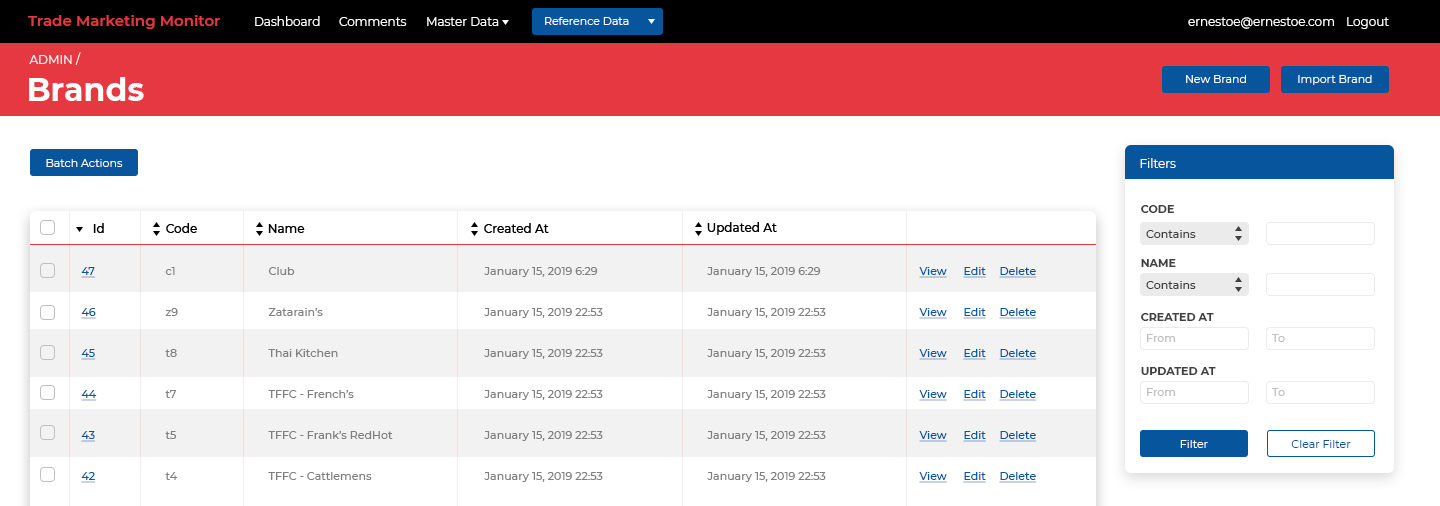
<style>
.page{position:relative;width:1440px;height:506px;background:#ffffff}
.page>*{position:absolute;margin:0}
.t1{font:15px "Montserrat-SemiBold";color:#e53841}
.t2{font:12px "Montserrat-Regular";color:#ffffff}
.t3{font:11px "Montserrat-Regular";color:#ffffff}
.t4{font:32.5px "Montserrat-Bold";color:#ffffff}
.t5{font:11px "Montserrat-Bold";color:#404040}
.t6{font:12px "Montserrat-Medium";color:#000000}
.t7{font:11px "Montserrat-Medium";color:#404040}
.t8{font:11px/41px "Montserrat-Medium";color:#808080}
.t9{font:11px/41px "Montserrat-Medium";color:#07559c;text-decoration:underline}
.t10{font:11px "Montserrat-Medium";color:#bfbfbf}
.t11{font:11px "Montserrat-Regular";color:#07559c}
</style>
<div class="page">
<p class="t1" style="left:27px;top:15px;width:193px;height:14px">Trade Marketing Monitor</p>
<p class="t2" style="left:255px;top:16px;width:65px;height:10px">Dashboard</p>
<p class="t2" style="left:339px;top:17px;width:68px;height:9px">Comments</p>
<p class="t2" style="left:427px;top:17px;width:72px;height:9px">Master Data</p>
<p class="t3" style="left:545px;top:17px;width:84px;height:8px">Reference Data</p>
<p class="t2" style="left:1188px;top:17px;width:146px;height:12px">ernestoe@ernestoe.com</p>
<p class="t2" style="left:1347px;top:17px;width:42px;height:12px">Logout</p>
<p class="t2" style="left:29px;top:52px;width:52px;height:13px">ADMIN /</p>
<p class="t4" style="left:29px;top:77px;width:115px;height:24px">Brands</p>
<p class="t3" style="left:1186px;top:75px;width:60px;height:8px">New Brand</p>
<p class="t3" style="left:1298px;top:75px;width:74px;height:10px">Import Brand</p>
<p class="t3" style="left:46px;top:159px;width:77px;height:8px">Batch Actions</p>
<p class="t2" style="left:1140px;top:158px;width:36px;height:10px">Filters</p>
<p class="t5" style="left:1141px;top:205px;width:33px;height:8px">CODE</p>
<p class="t6" style="left:707px;top:222px;width:70px;height:13px">Updated At</p>
<p class="t6" style="left:93px;top:223px;width:11px;height:10px">Id</p>
<p class="t6" style="left:166px;top:223px;width:31px;height:10px">Code</p>
<p class="t6" style="left:268px;top:224px;width:37px;height:9px">Name</p>
<p class="t6" style="left:484px;top:223px;width:65px;height:10px">Created At</p>
<p class="t7" style="left:1146px;top:230px;width:50px;height:8px">Contains</p>
<p class="t8" style="left:165px;top:267px;width:13px;height:213px">c1<br>z9<br>t8<br>t7<br>t5<br>t4</p>
<p class="t8" style="left:268px;top:267px;width:125px;height:213px">Club <br>Zatarain’s <br>Thai Kitchen<br>TFFC - French’s<br>TFFC - Frank’s RedHot<br>TFFC - Cattlemens</p>
<p class="t8" style="left:484px;top:267px;width:119px;height:215px">January 15, 2019 6:29<br>January 15, 2019 22:53<br>January 15, 2019 22:53<br>January 15, 2019 22:53<br>January 15, 2019 22:53<br>January 15, 2019 22:53</p>
<p class="t8" style="left:707px;top:267px;width:119px;height:215px">January 15, 2019 6:29<br>January 15, 2019 22:53<br>January 15, 2019 22:53<br>January 15, 2019 22:53<br>January 15, 2019 22:53<br>January 15, 2019 22:53</p>
<p class="t9" style="left:919px;top:267px;width:28px;height:216px">View<br>View<br>View<br>View<br>View<br>View</p>
<p class="t9" style="left:963px;top:267px;width:23px;height:216px">Edit<br>Edit<br>Edit<br>Edit<br>Edit<br>Edit</p>
<p class="t9" style="left:999px;top:267px;width:38px;height:216px">Delete<br>Delete<br>Delete<br>Delete<br>Delete<br>Delete</p>
<p class="t5" style="left:1141px;top:259px;width:35px;height:8px">NAME</p>
<p class="t7" style="left:1146px;top:281px;width:50px;height:8px">Contains</p>
<p class="t5" style="left:1141px;top:313px;width:73px;height:8px">CREATED AT</p>
<p class="t10" style="left:1147px;top:334px;width:29px;height:8px">From</p>
<p class="t10" style="left:1272px;top:334px;width:13px;height:8px">To</p>
<p class="t5" style="left:1141px;top:367px;width:75px;height:8px">UPDATED AT</p>
<p class="t10" style="left:1147px;top:388px;width:29px;height:8px">From</p>
<p class="t10" style="left:1272px;top:388px;width:13px;height:8px">To</p>
<p class="t3" style="left:1180px;top:440px;width:28px;height:8px">Filter</p>
<p class="t11" style="left:1291px;top:440px;width:60px;height:8px">Clear Filter</p>
</div>
